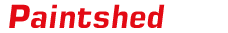
<style>
.page{position:relative;width:228px;height:33px;background:#ffffff}
.page>*{position:absolute;margin:0}
.t1{font:32px "Square721-BoldItalic";color:#e30a14}
</style>
<div class="page">
<p class="t1" style="left:9px;top:4px;width:156px;height:24px">Paintshed</p>
</div>
